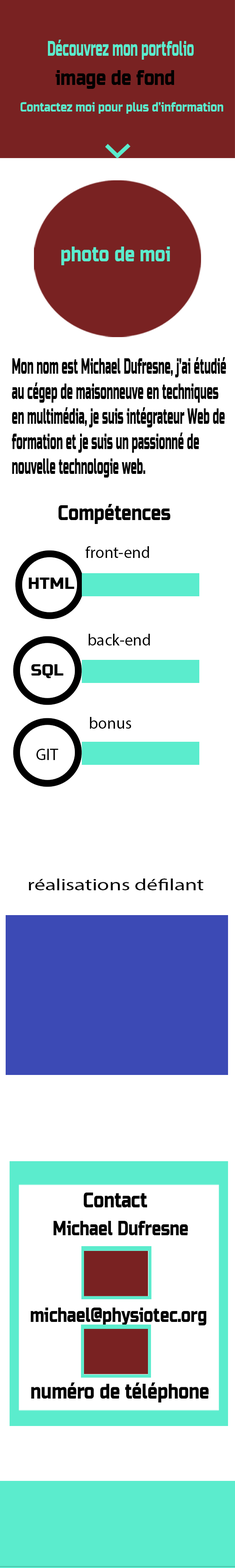
<style>
.page{position:relative;width:235px;height:1568px;background:#ffffff}
.page>*{position:absolute;margin:0}
.t1{font:20.9px "RussoOne";color:#5beccd;scale:0.56 1}
.t2{font:20.9px "RussoOne";color:#010101;scale:0.79 1}
.t3{font:13.2px "RussoOne";color:#5beccd;scale:0.79 1}
.t4{font:20.9px "RussoOne";color:#5beccd;scale:0.79 1}
.t5{font:20.9px "RussoOne";color:#000000;scale:0.48 1}
.t6{font:20.9px "RussoOne";color:#000000;scale:0.79 1}
.t7{font:16.3px "MyriadPro-Regular";color:#000000}
.t8{font:16.3px "RussoOne";color:#000000}
.t9{font:16.4px "MyriadPro-Regular";color:#000000;scale:1.33 1}
.t10{font:19.8px "RussoOne";color:#000000;scale:0.77 1}
</style>
<div class="page">
<p class="t1" style="left:48px;top:40px;width:146px;height:20px">Découvrez mon portfolio</p>
<p class="t2" style="left:55px;top:70px;width:119px;height:19px">image de fond</p>
<p class="t3" style="left:20px;top:102px;width:203px;height:12px">Contactez moi pour plus d’information</p>
<p class="t4" style="left:61px;top:247px;width:109px;height:18px">photo de moi</p>
<p class="t5" style="left:12px;top:357px;width:214px;height:121px">Mon nom est Michael Dufresne, j’ai étudié<br>au cégep de maisonneuve en techniques<br>en multimédia, je suis intégrateur Web de formation et je suis un passionné de nouvelle technologie web.</p>
<p class="t6" style="left:58px;top:504px;width:113px;height:20px">Compétences</p>
<p class="t7" style="left:85px;top:546px;width:64px;height:12px">front-end</p>
<p class="t8" style="left:29px;top:578px;width:45px;height:11px">HTML</p>
<p class="t7" style="left:88px;top:634px;width:62px;height:11px">back-end</p>
<p class="t8" style="left:31px;top:664px;width:33px;height:14px">SQL</p>
<p class="t7" style="left:90px;top:717px;width:42px;height:12px">bonus</p>
<p class="t7" style="left:36px;top:749px;width:22px;height:11px">GIT</p>
<p class="t9" style="left:29px;top:879px;width:175px;height:11px">réalisations défilant</p>
<p class="t6" style="left:84px;top:1193px;width:63px;height:14px">Contact</p>
<p class="t10" style="left:54px;top:1221px;width:134px;height:14px">Michael Dufresne</p>
<p class="t10" style="left:30px;top:1308px;width:176px;height:17px">michael@physiotec.org</p>
<p class="t6" style="left:31px;top:1382px;width:178px;height:20px">numéro de téléphone</p>
</div>
